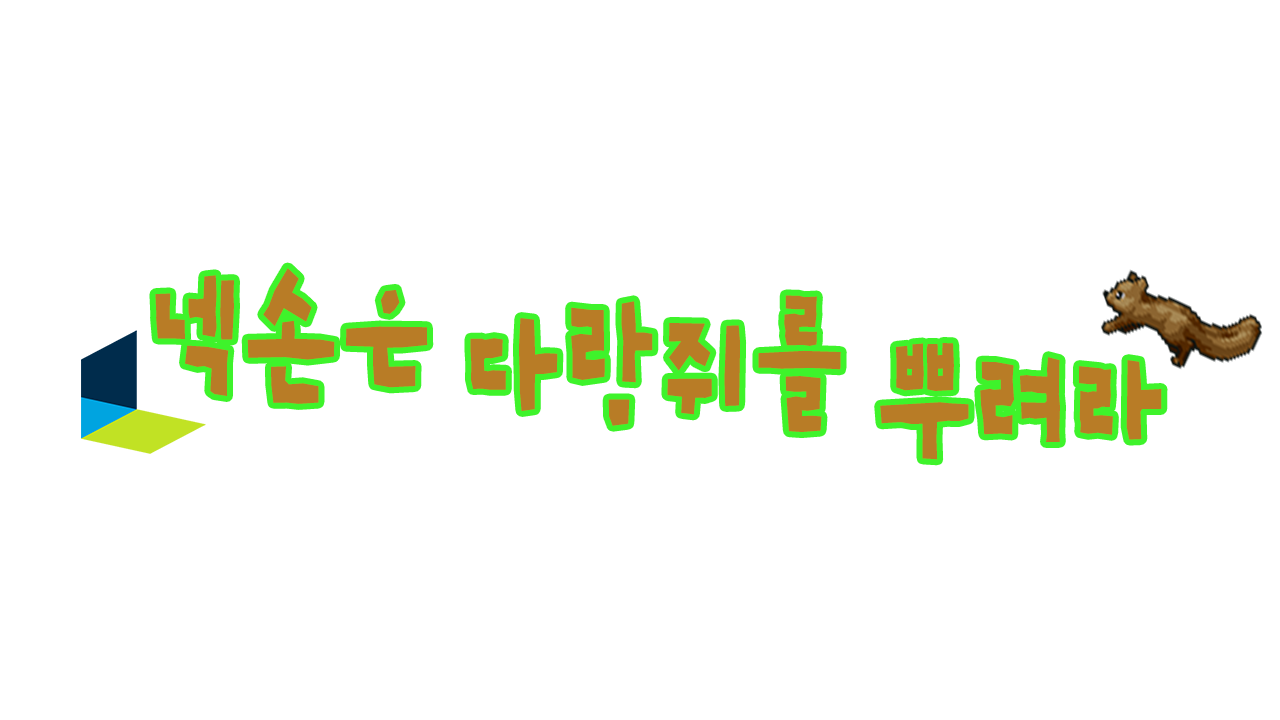
<style>
.page{position:relative;width:1280px;height:720px;background:#ffffff}
.page>*{position:absolute;margin:0}
.t1{font:144px "SDLeedongjin-dBd";color:#b87c26;scale:0.67 1}
</style>
<div class="page">
<p class="t1" style="left:155px;top:268px;width:273px;height:136px">넥손은</p>
<p class="t1" style="left:470px;top:295px;width:371px;height:137px">다람쥐를</p>
<p class="t1" style="left:880px;top:343px;width:282px;height:117px">뿌려라</p>
</div>
